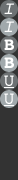
<style>
.page{position:relative;width:18px;height:180px;background:#333333}
.page>*{position:absolute;margin:0}
.t1{font:18px "Courier-Oblique";letter-spacing:0.01em;color:#ffffff}
.t2{font:18px "Courier-Bold";letter-spacing:0.01em;color:#ffffff}
.t3{font:18px "Courier";letter-spacing:0.01em;color:#ffffff}
</style>
<div class="page">
<p class="t1" style="left:4px;top:3px;width:10px;height:11px">I</p>
<p class="t1" style="left:4px;top:21px;width:10px;height:11px">I</p>
<p class="t2" style="left:4px;top:39px;width:10px;height:11px">B</p>
<p class="t2" style="left:4px;top:57px;width:10px;height:11px">B</p>
<p class="t3" style="left:4px;top:75px;width:10px;height:11px">U</p>
<p class="t3" style="left:4px;top:93px;width:10px;height:11px">U</p>
</div>
